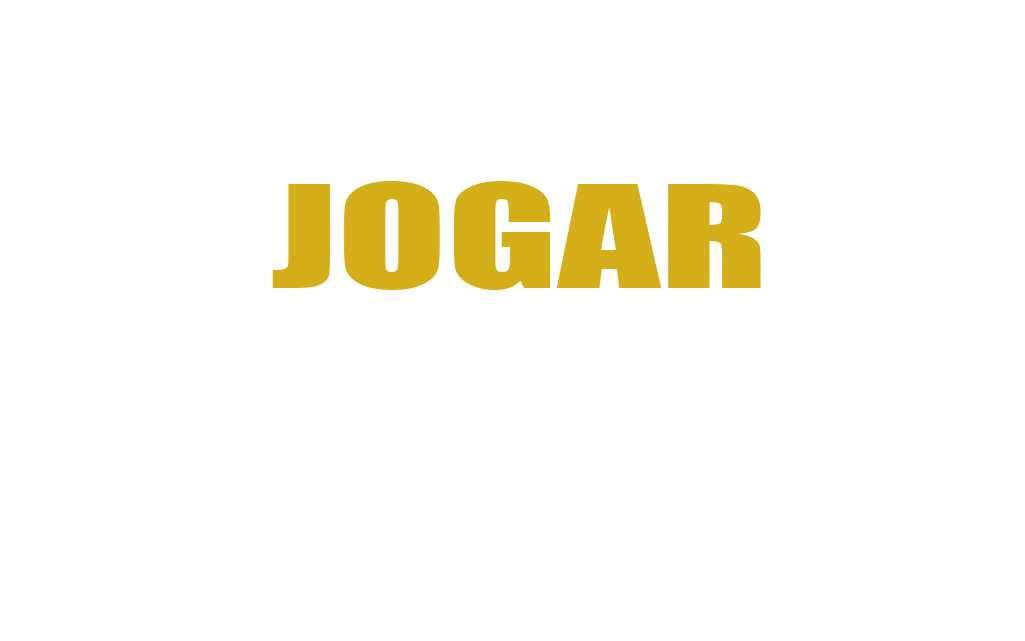
<style>
.page{position:relative;width:1025px;height:641px;background:#ffffff}
.page>*{position:absolute;margin:0}
.t1{font:226.4px "Impact";color:#d4af1a;font-variant:small-caps;scale:1.52 1}
.t2{font:169.8px "SegoeScript-Bold";color:#036c6f;font-variant:small-caps;scale:1.52 1}
</style>
<div class="page">
<p class="t1" style="left:272px;top:181px;width:489px;height:109px"><span class="t2">    </span>JOGAR</p>
</div>
